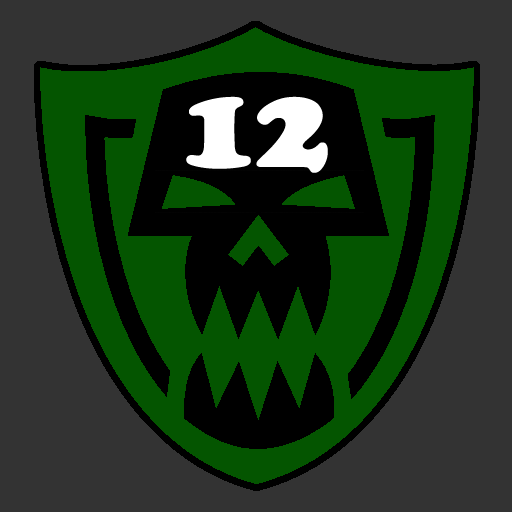
<style>
.page{position:relative;width:512px;height:512px;background:#333333}
.page>*{position:absolute;margin:0}
.t1{font:125px "CooperBlack";color:#ffffff}
</style>
<div class="page">
<p class="t1" style="left:186px;top:96px;width:142px;height:77px">12</p>
</div>
